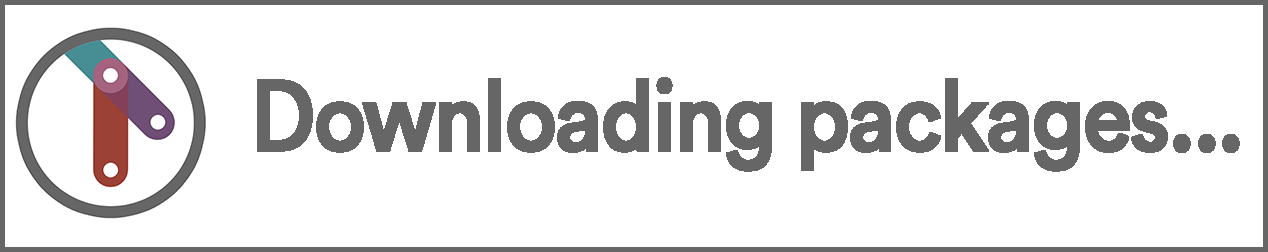
<style>
.page{position:relative;width:1268px;height:252px;background:#ffffff}
.page>*{position:absolute;margin:0}
.t1{font:100px "CircularStd-Medium";letter-spacing:-0.05em;color:#666666;font-weight:bold;scale:0.9 1}
</style>
<div class="page">
<p class="t1" style="left:257px;top:77px;width:983px;height:95px">Downloading packages...</p>
</div>
